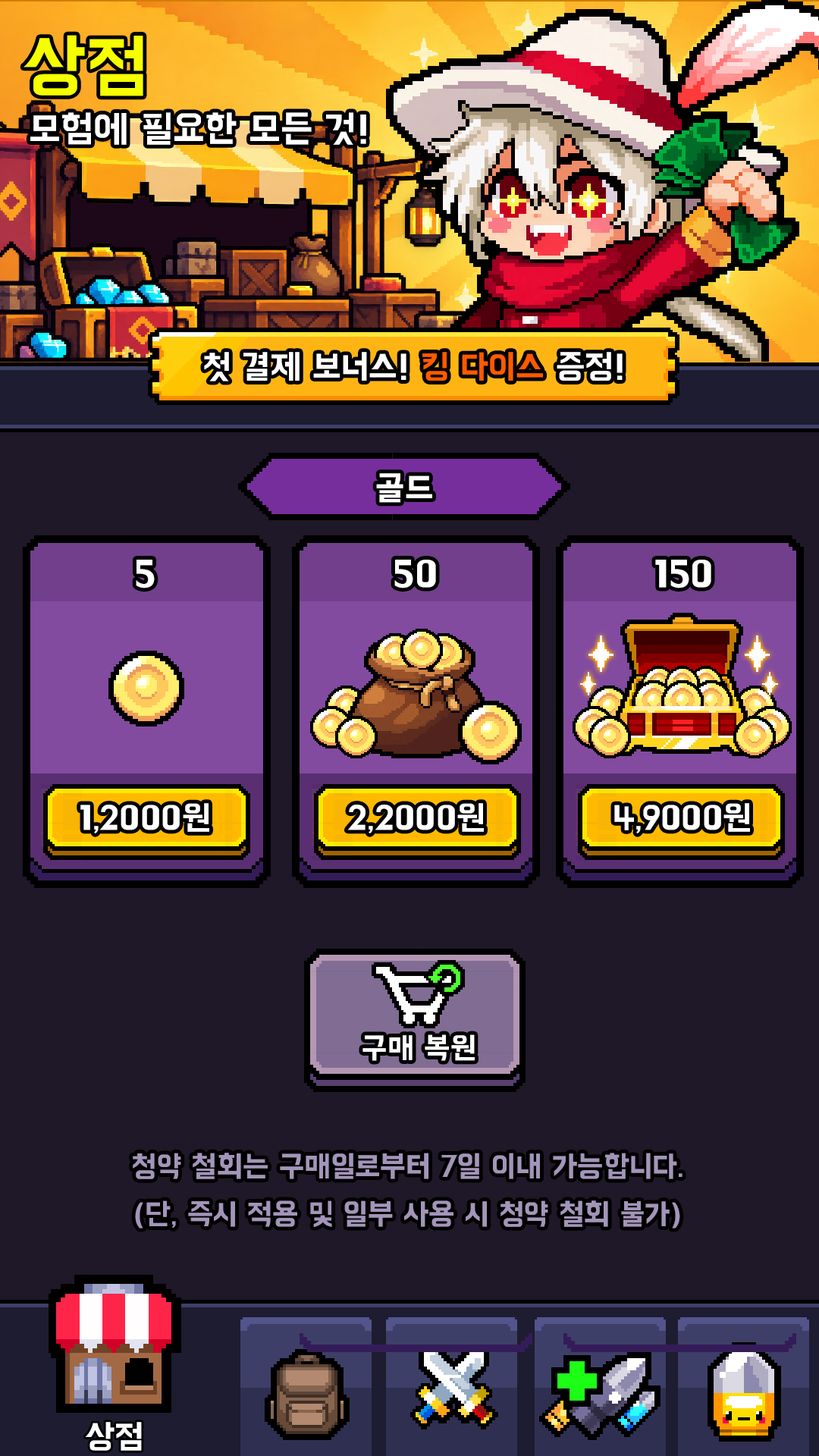
<style>
.page{position:relative;width:819px;height:1456px;background:#1e1828}
.page>*{position:absolute;margin:0}
.t1{font:72px "BMHANNAProOTF";color:#f6ff00}
.t2{font:37.9px "BMHANNAProOTF";color:#ffffff}
.t3{font:34.1px "BMHANNAProOTF";color:#ffffff}
.t4{font:34.1px "BMHANNAProOTF";color:#ff5a00}
.t5{font:30.3px "BMHANNAProOTF";color:#ffffff}
.t6{font:30.3px "BMHANNAProOTF";color:#a395b9}
</style>
<div class="page">
<p class="t1" style="left:24px;top:35px;width:119px;height:61px">상점</p>
<p class="t2" style="left:30px;top:112px;width:336px;height:33px">모험에 필요한 모든 것!</p>
<p class="t3" style="left:204px;top:352px;width:419px;height:29px">첫 결제 보너스! <span class="t4">킹 다이스</span> 증정!</p>
<p class="t3" style="left:376px;top:473px;width:56px;height:30px">골드</p>
<p class="t2" style="left:136px;top:560px;width:19px;height:28px">5</p>
<p class="t2" style="left:394px;top:560px;width:42px;height:28px">50</p>
<p class="t2" style="left:655px;top:560px;width:56px;height:28px">150</p>
<p class="t3" style="left:80px;top:803px;width:129px;height:30px">1,2000원</p>
<p class="t3" style="left:347px;top:803px;width:137px;height:30px">2,2000원</p>
<p class="t3" style="left:614px;top:803px;width:136px;height:30px">4,9000원</p>
<p class="t5" style="left:362px;top:1034px;width:113px;height:27px">구매 복원</p>
<p class="t6" style="left:133px;top:1153px;width:549px;height:26px">청약 철회는 구매일로부터 7일 이내 가능합니다.</p>
<p class="t6" style="left:135px;top:1200px;width:545px;height:28px">(단, 즉시 적용 및 일부 사용 시 청약 철회 불가)</p>
<p class="t3" style="left:85px;top:1422px;width:57px;height:29px">상점</p>
</div>
